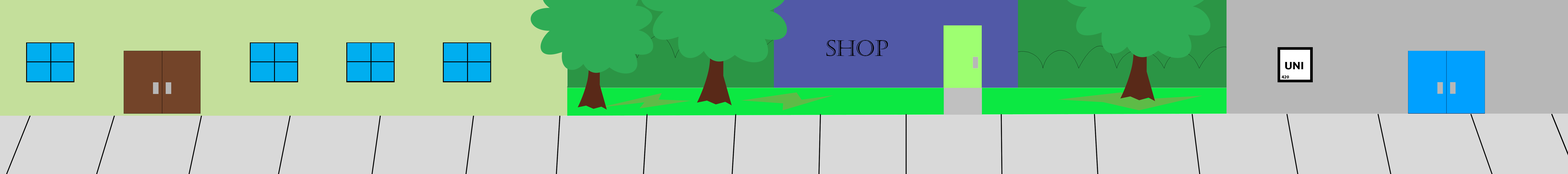
<style>
.page{position:relative;width:1568px;height:174px;background:#d9d9d9}
.page>*{position:absolute;margin:0}
.t1{font:21.8px "Castellar";color:#000000}
.t2{font:11.1px "MavenPro-Bold";color:#000000}
.t3{font:11.1px "MavenPro-Black";color:#000000}
.t4{font:4.5px "MyriadPro-Bold";color:#000000}
</style>
<div class="page">
<p class="t1" style="left:827px;top:40px;width:61px;height:16px">shop</p>
<p class="t2" style="left:1285px;top:62px;width:18px;height:8px"><span class="t3"> </span>UNI</p>
<p class="t4" style="left:1282px;top:76px;width:7px;height:3px">420</p>
</div>
